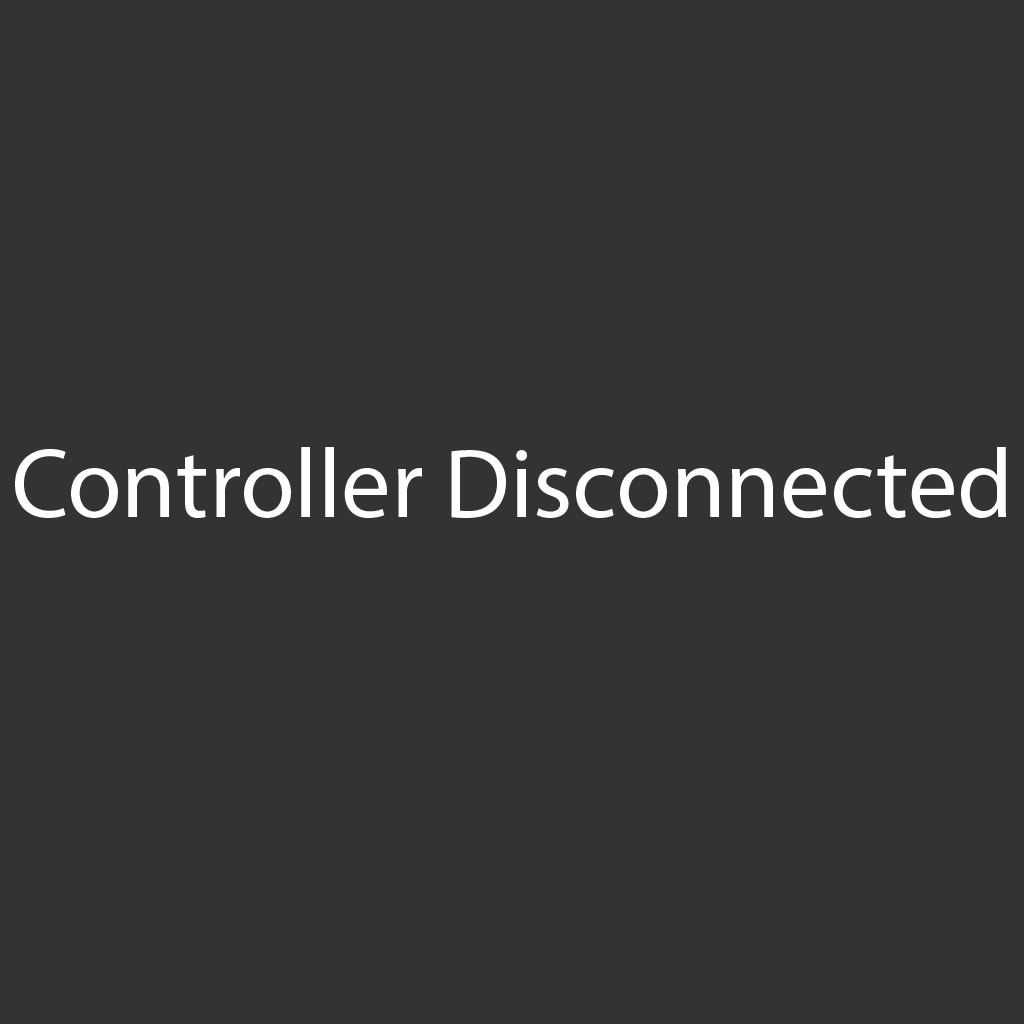
<style>
.page{position:relative;width:1024px;height:1024px;background:#333333}
.page>*{position:absolute;margin:0}
.t1{font:99px "MyriadPro-Regular";color:#ffffff}
</style>
<div class="page">
<p class="t1" style="left:15px;top:447px;width:992px;height:71px">Controller Disconnected</p>
</div>
